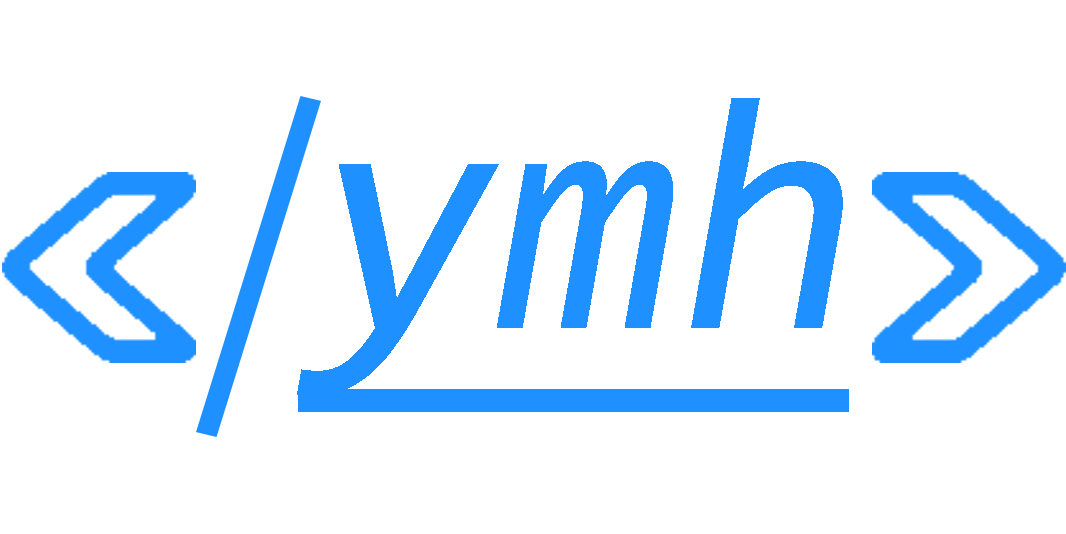
<style>
.page{position:relative;width:1066px;height:534px;background:#ffffff}
.page>*{position:absolute;margin:0}
.t1{font:333.8px "Consolas";color:#1e90ff;font-style:italic;text-decoration:underline}
</style>
<div class="page">
<p class="t1" style="left:297px;top:98px;width:552px;height:314px">ymh</p>
</div>
